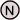
<style>
.page{position:relative;width:20px;height:20px;background:#dfd9d8}
.page>*{position:absolute;margin:0}
.t1{font:13px "ArialMT";color:#000000}
</style>
<div class="page">
<p class="t1" style="left:5px;top:5px;width:9px;height:11px">N</p>
</div>
